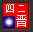
<style>
.page{position:relative;width:33px;height:32px;background:#f20000}
.page>*{position:absolute;margin:0}
.t1{font:10.4px "SimSun";color:#ffffff}
.t2{font:11.7px "SimSun";color:#ffffff}
</style>
<div class="page">
<p class="t1" style="left:6px;top:4px;width:19px;height:9px">四二</p>
<p class="t2" style="left:16px;top:15px;width:11px;height:12px">晋</p>
</div>
